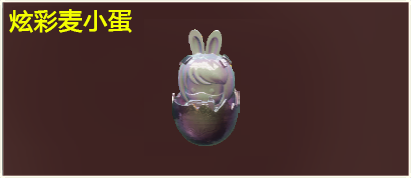
<style>
.page{position:relative;width:411px;height:178px}
.page>*{position:absolute;margin:0}
.t1{font:24px "MicrosoftYaHeiUI";color:#f4ff00;font-weight:bold}
</style>
<div class="page">
<p class="t1" style="left:9px;top:9px;width:123px;height:24px">炫彩麦小蛋</p>
</div>
